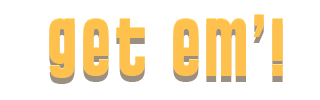
<style>
.page{position:relative;width:320px;height:100px;background:#ffffff}
.page>*{position:absolute;margin:0}
.t1{font:84.4px "PussycatSnickers";letter-spacing:0.059em;color:#ffc14d}
</style>
<div class="page">
<p class="t1" style="left:49px;top:14px;width:234px;height:63px">get em’!</p>
<p class="t1" style="left:49px;top:15px;width:234px;height:63px">get em’!</p>
<p class="t1" style="left:49px;top:21px;width:234px;height:63px">get em’!</p>
</div>
